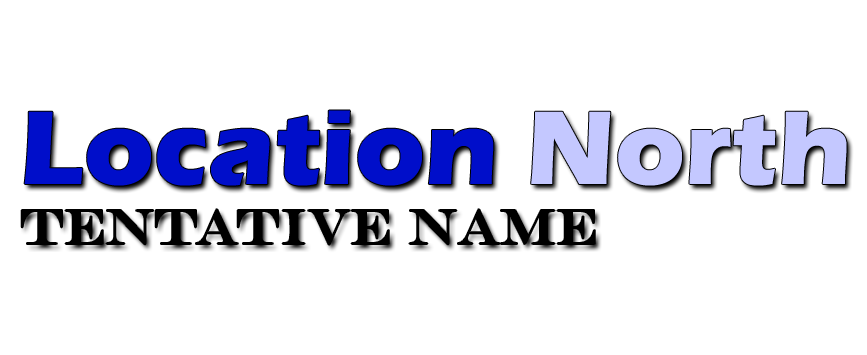
<style>
.page{position:relative;width:867px;height:355px;background:#ffffff}
.page>*{position:absolute;margin:0}
.t1{font:50px "EngraversMT";color:#000000}
.t2{font:108.3px "ErasITC-Bold";color:#000eca}
.t3{font:108.3px/69.4px "ErasITC-Bold";color:#000eca}
.t4{font:108.3px/86.1px "ErasITC-Bold";color:#c4c8ff}
.t5{font:108.3px/69.4px "ErasITC-Bold";color:#c4c8ff}
</style>
<div class="page">
<p class="t1" style="left:21px;top:110px;width:826px;height:135px"><span class="t2">Lo</span><span class="t3">cation </span><span class="t4">N</span><span class="t5">orth<br></span>tentative name</p>
</div>
